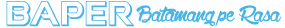
<style>
.page{position:relative;width:285px;height:28px;background:#ffffff}
.page>*{position:absolute;margin:0}
.t1{font:37.8px "SingaporeSling3D";color:#49b5e7}
.t2{font:36px "WolfintheCity";color:#49b5e7}
</style>
<div class="page">
<p class="t1" style="left:6px;top:1px;width:129px;height:26px">BAPer</p>
<p class="t2" style="left:136px;top:5px;width:145px;height:22px">Batamang pe Rasa</p>
</div>
